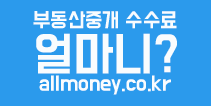
<style>
.page{position:relative;width:211px;height:106px;background:#2b9aec}
.page>*{position:absolute;margin:0}
.t1{font:18px "BMDoHyeon-OTF";color:#f9fcfe}
.t2{font:18px/41px "BMDoHyeon-OTF";color:#f9fcfe}
.t3{font:42px/41px "BMDoHyeon-OTF";color:#f9fcfe}
</style>
<div class="page">
<p class="t1" style="left:33px;top:11px;width:144px;height:84px;text-align:center"><span class="t2">부동산중개 수수료<br></span><span class="t3">얼마니?<br></span>allmoney.co.kr</p>
</div>
